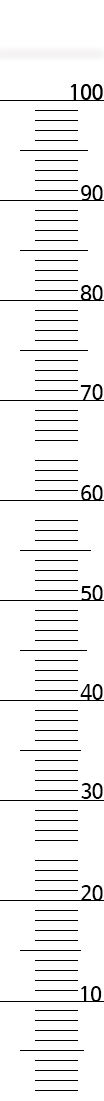
<style>
.page{position:relative;width:104px;height:1101px;background:#ffffff}
.page>*{position:absolute;margin:0}
.t1{font:20px "HancomGothicBold";color:#000000}
</style>
<div class="page">
<p class="t1" style="left:81px;top:185px;width:22px;height:16px">90</p>
<p class="t1" style="left:80px;top:285px;width:23px;height:16px">80</p>
<p class="t1" style="left:80px;top:384px;width:23px;height:16px">70</p>
<p class="t1" style="left:81px;top:485px;width:22px;height:16px">60</p>
<p class="t1" style="left:81px;top:585px;width:22px;height:16px">50</p>
<p class="t1" style="left:80px;top:684px;width:23px;height:16px">40</p>
<p class="t1" style="left:81px;top:783px;width:22px;height:16px">30</p>
<p class="t1" style="left:81px;top:885px;width:22px;height:16px">20</p>
<p class="t1" style="left:81px;top:986px;width:21px;height:16px">10</p>
</div>
